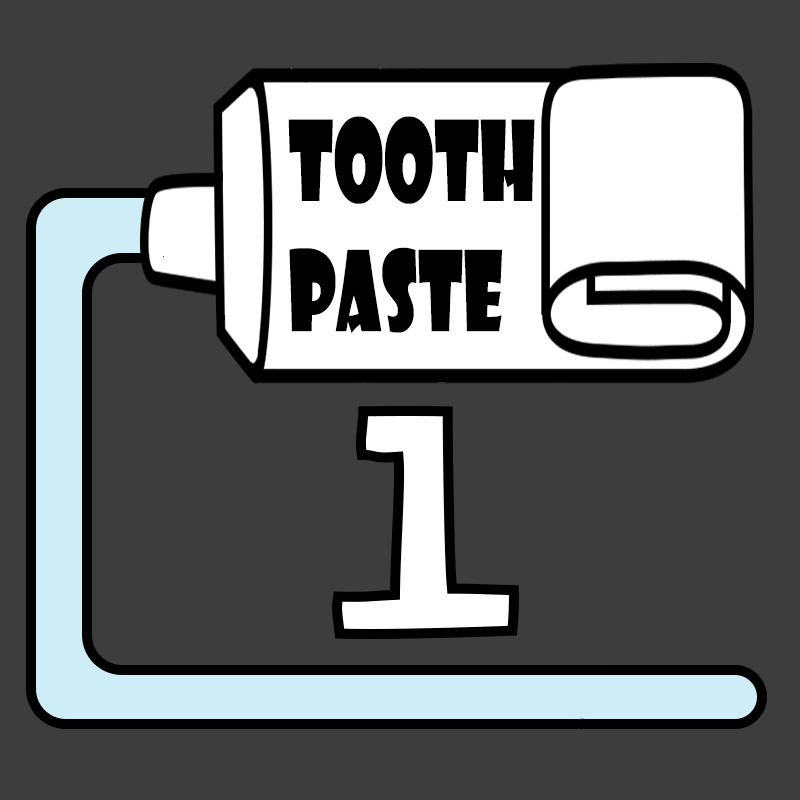
<style>
.page{position:relative;width:800px;height:800px;background:#3e3d3d}
.page>*{position:absolute;margin:0}
.t1{font:108.5px "ShowcardGothic-Reg";color:#000000;scale:0.67 1}
</style>
<div class="page">
<p class="t1" style="left:288px;top:116px;width:247px;height:217px">TOoth<br>PAste</p>
</div>
